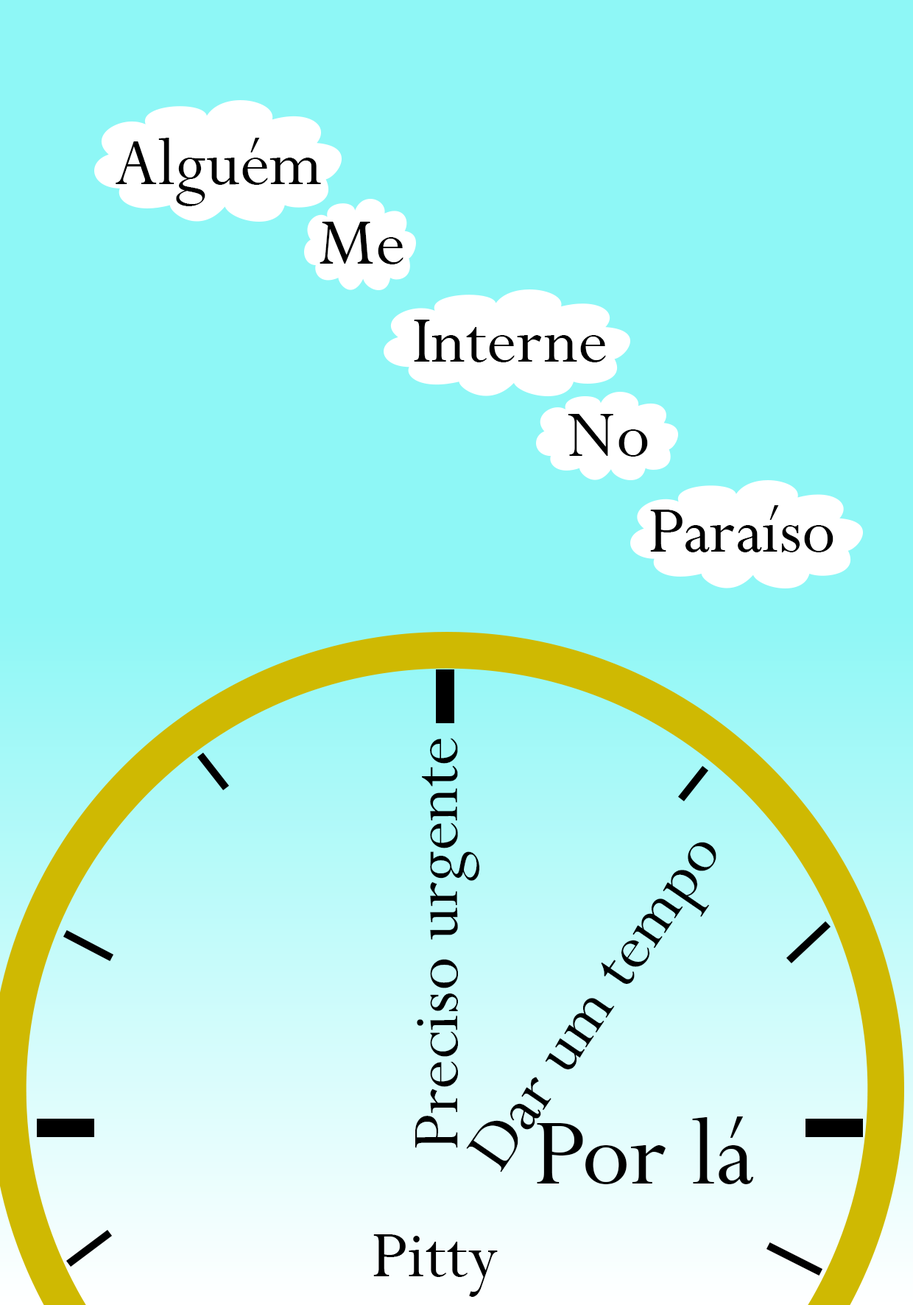
<style>
.page{position:relative;width:913px;height:1305px;background:#8ef7f6}
.page>*{position:absolute;margin:0}
.t1{font:73.7px "Perpetua";color:#000000}
.t2{font:105.9px "Perpetua";color:#000000}
</style>
<div class="page">
<p class="t1" style="left:116px;top:138px;width:205px;height:68px">Alguém</p>
<p class="t1" style="left:320px;top:222px;width:84px;height:42px">Me</p>
<p class="t1" style="left:414px;top:320px;width:192px;height:42px">Interne</p>
<p class="t1" style="left:568px;top:414px;width:80px;height:43px">No</p>
<p class="t1" style="left:650px;top:505px;width:184px;height:48px">Paraíso</p>
<p class="t1" style="left:415px;top:738px;width:65px;height:410px;rotate:-90deg">Preciso urgente</p>
<p class="t1" style="left:466px;top:842px;width:251px;height:331px;rotate:-56deg">Dar um tempo</p>
<p class="t2" style="left:537px;top:1117px;width:217px;height:68px">Por lá</p>
<p class="t1" style="left:373px;top:1235px;width:125px;height:62px">Pitty</p>
</div>
